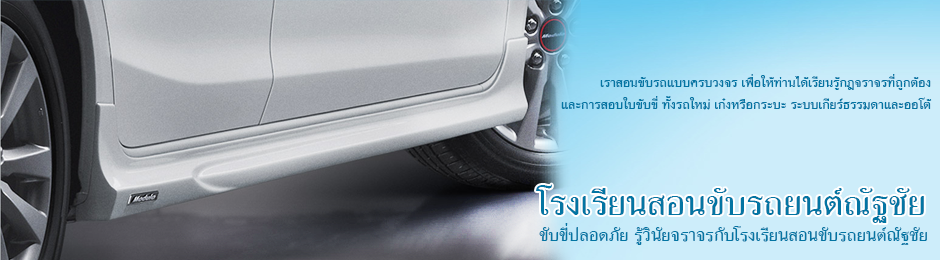
<style>
.page{position:relative;width:940px;height:260px}
.page>*{position:absolute;margin:0}
.t1{font:18px "CRULanChand56Bold";color:#0375a3}
.t2{font:48px "CRULanChand56Bold";color:#0375a3}
.t3{font:24px "CRULanChand56Bold";color:#0375a3}
</style>
<div class="page">
<p class="t1" style="left:561px;top:74px;width:371px;height:36px">เราสอนขับรถแบบครบวงจร เพื่อให้ท่านได้เรียนรู้กฎจราจรที่ถูกต้อง <br>และการสอบใบขับขี่ ทั้งรถใหม่ เก๋งหรือกระบะ ระบบเกียร์ธรรมดาและออโต้</p>
<p class="t2" style="left:536px;top:184px;width:388px;height:39px">โรงเรียนสอนขับรถยนต์ณัฐชัย</p>
<p class="t3" style="left:539px;top:223px;width:388px;height:22px">ขับขี่ปลอดภัย รู้วินัยจราจรกับโรงเรียนสอนขับรถยนต์ณัฐชัย</p>
</div>
